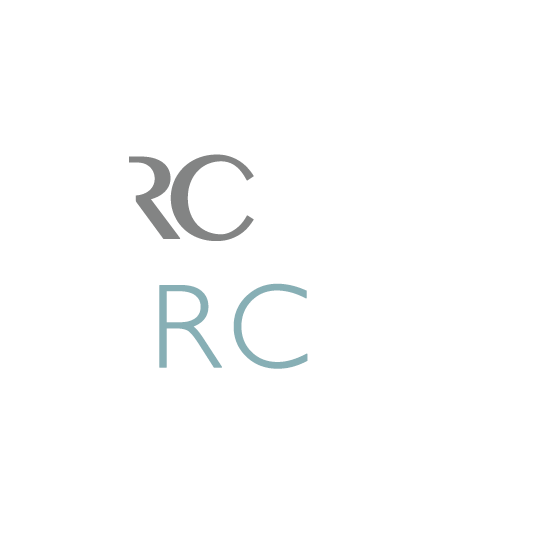
<style>
.page{position:relative;width:537px;height:534px;background:#ffffff}
.page>*{position:absolute;margin:0}
.t1{font:120px "GillSans-Light";letter-spacing:0.05em;color:#87afb5;font-weight:bold}
</style>
<div class="page">
<p class="t1" style="left:159px;top:283px;width:149px;height:86px">RC</p>
</div>
